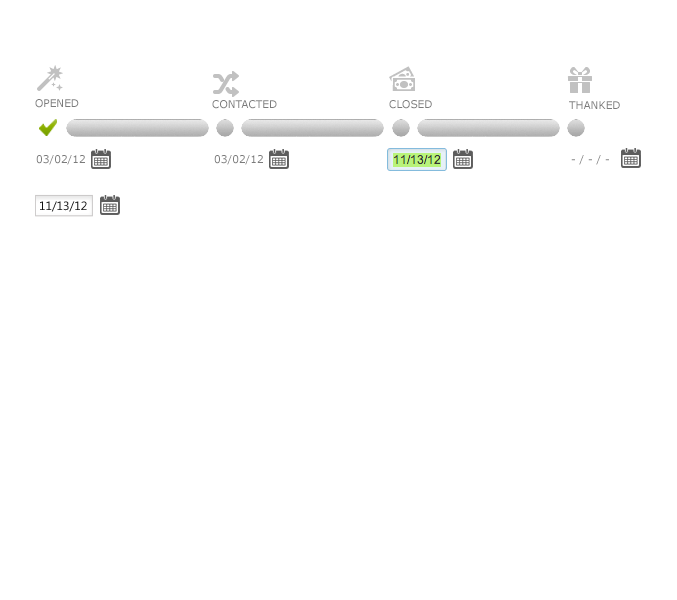
<style>
.page{position:relative;width:677px;height:600px;background:#ffffff}
.page>*{position:absolute;margin:0}
.t1{font:10.5px "Verdana";color:#7b7b7b}
.t2{font:10.5px "Verdana"}
</style>
<div class="page">
<p class="t1" style="left:35px;top:99px;width:44px;height:9px">OPENED</p>
<p class="t1" style="left:212px;top:100px;width:65px;height:9px">CONTACTED</p>
<p class="t1" style="left:389px;top:100px;width:43px;height:9px">CLOSED</p>
<p class="t1" style="left:569px;top:101px;width:51px;height:8px">THANKED</p>
<p class="t1" style="left:36px;top:155px;width:49px;height:10px">03/02/12</p>
<p class="t1" style="left:214px;top:155px;width:49px;height:10px">03/02/12</p>
<p class="t2" style="left:571px;top:155px;width:38px;height:10px">- / - / -</p>
</div>
